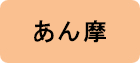
<style>
.page{position:relative;width:140px;height:63px;background:#fac090}
.page>*{position:absolute;margin:0}
.t1{font:24px "HGSGothicE";letter-spacing:0.065em;color:#000000}
</style>
<div class="page">
<p class="t1" style="left:34px;top:20px;width:72px;height:23px">あん摩</p>
</div>
